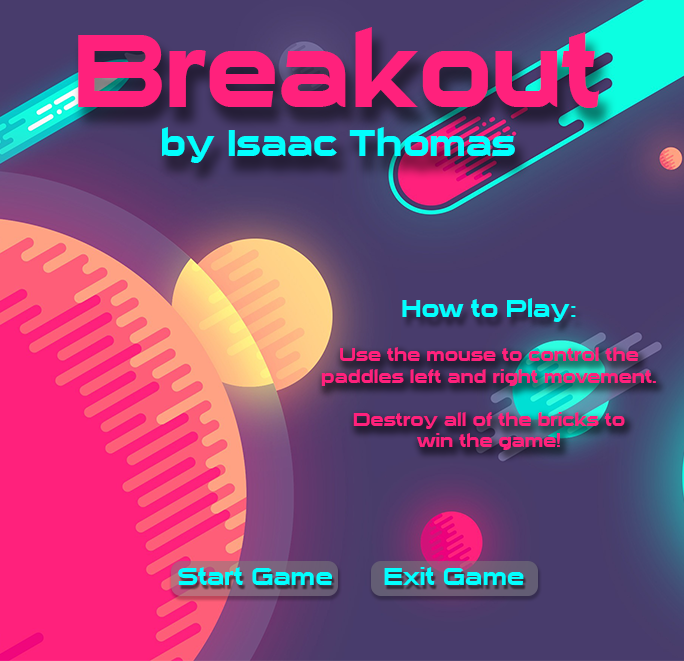
<style>
.page{position:relative;width:684px;height:661px}
.page>*{position:absolute;margin:0}
.t1{font:100px "SuiGenerisFree";color:#ff217c}
.t2{font:36px "SuiGenerisFree";color:#02ffff}
.t3{font:24px "SuiGenerisFree";color:#02ffff}
.t4{font:18px "SuiGenerisFree";color:#ff217c}
</style>
<div class="page">
<p class="t1" style="left:78px;top:27px;width:522px;height:81px">Breakout</p>
<p class="t2" style="left:162px;top:127px;width:353px;height:36px">by Isaac Thomas</p>
<p class="t3" style="left:402px;top:298px;width:174px;height:24px">How to Play:</p>
<p class="t4" style="left:321px;top:347px;width:335px;height:103px;text-align:center">Use the mouse to control the<br>paddles left and right movement.<br><br>Destroy all of the bricks to<br>win the game!</p>
<p class="t3" style="left:178px;top:567px;width:154px;height:18px">Start Game</p>
<p class="t3" style="left:384px;top:567px;width:140px;height:18px">Exit Game</p>
</div>
